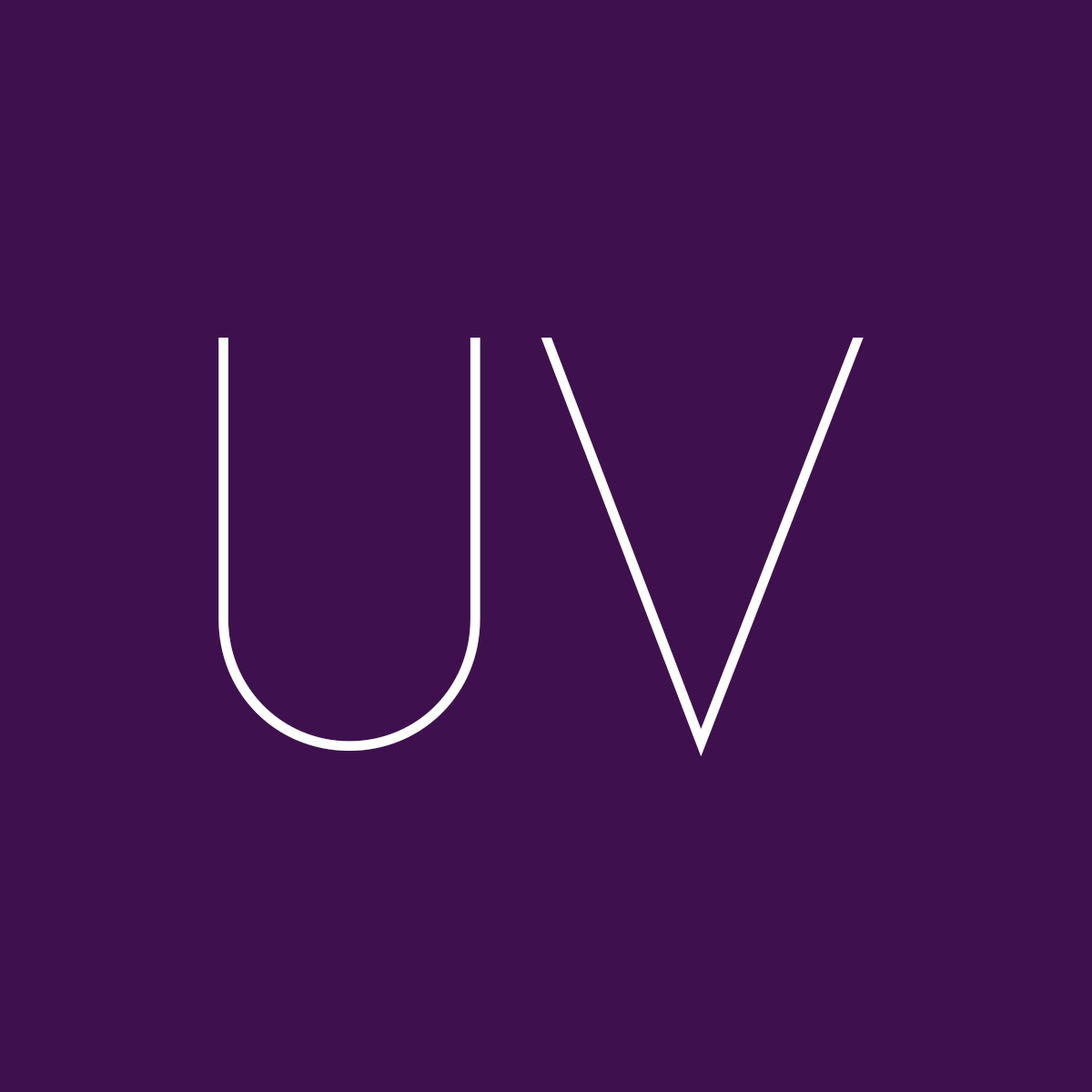
<style>
.page{position:relative;width:1092px;height:1092px;background:#3e114e}
.page>*{position:absolute;margin:0}
.t1{font:500.5px "Edelsans-UltraLight";color:#ffffff}
</style>
<div class="page">
<p class="t1" style="left:218px;top:338px;width:646px;height:418px">UV</p>
</div>
